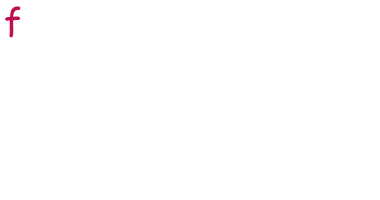
<style>
.page{position:relative;width:380px;height:200px;background:#ffffff}
.page>*{position:absolute;margin:0}
.t1{font:36px "ComicSansMS";color:#bd1051}
</style>
<div class="page">
<p class="t1" style="left:5px;top:6px;width:16px;height:32px">f</p>
</div>
